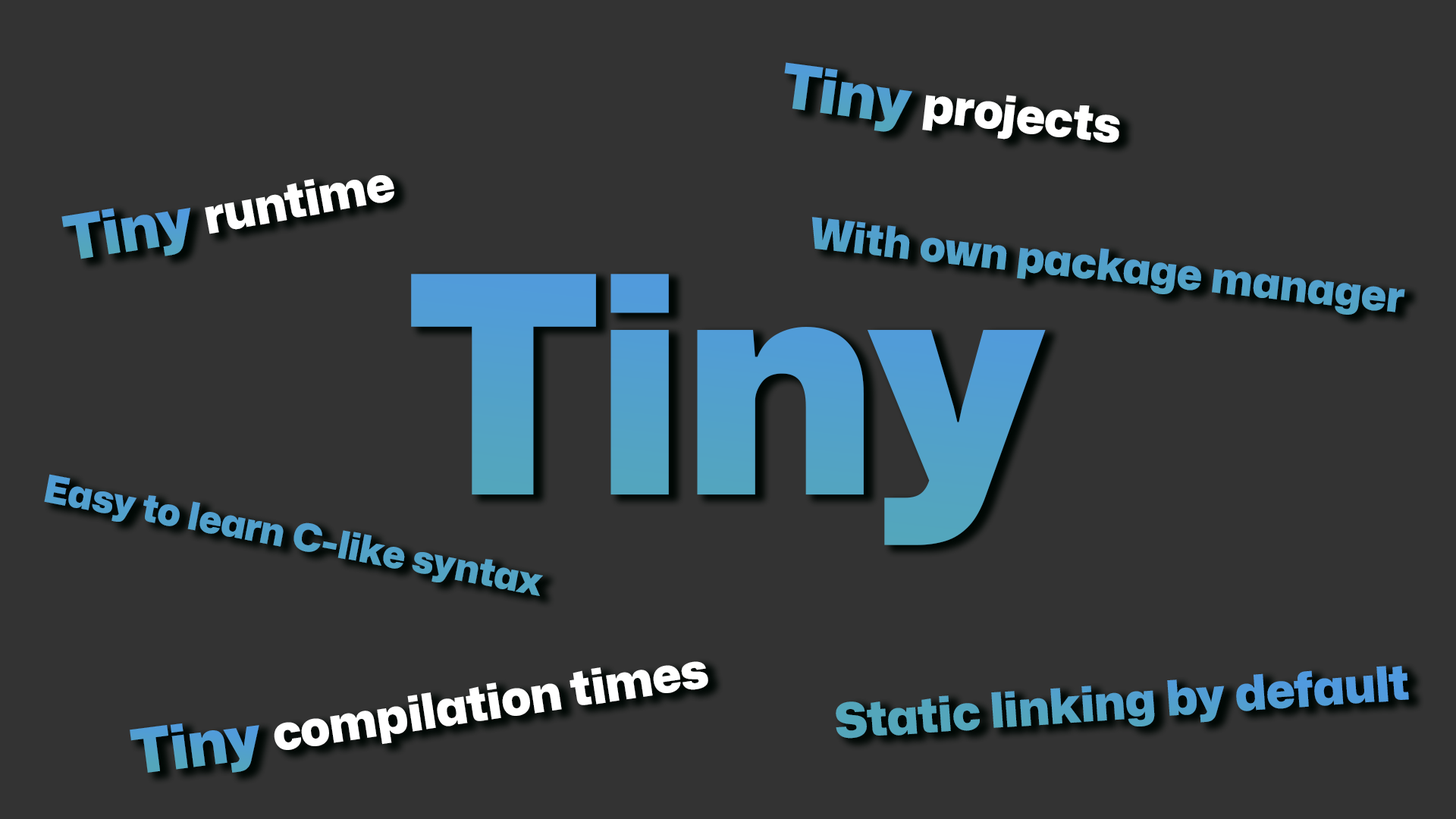
<style>
.page{position:relative;width:1456px;height:819px;background:#333333}
.page>*{position:absolute;margin:0}
.t1{font:61.5px "Mona-Sans-Black";color:#52a1cb}
.t2{font:49px "Mona-Sans-Black";color:#ffffff}
.t3{font:61.5px "Mona-Sans-Black";color:#52a0ce}
.t4{font:42.8px "Mona-Sans-Black";color:#52a1c9}
.t5{font:302.4px "Mona-Sans-Black";color:#52a0ce}
.t6{font:38.2px "Mona-Sans-Black";color:#52a1ca}
.t7{font:48.6px "Mona-Sans-Black";color:#52a2c8}
</style>
<div class="page">
<p class="t1" style="left:784px;top:62px;width:128px;height:70px;rotate:8deg">Tiny</p>
<p class="t2" style="left:922px;top:95px;width:198px;height:48px;rotate:6deg">projects</p>
<p class="t2" style="left:205px;top:175px;width:189px;height:59px;rotate:-10deg">runtime</p>
<p class="t3" style="left:61px;top:208px;width:129px;height:51px;rotate:-9deg">Tiny</p>
<p class="t4" style="left:811px;top:217px;width:594px;height:98px;rotate:6deg">With own package manager</p>
<p class="t5" style="left:411px;top:274px;width:635px;height:271px">Tiny</p>
<p class="t6" style="left:44px;top:474px;width:499px;height:122px;rotate:11deg">Easy to learn C-like syntax</p>
<p class="t2" style="left:274px;top:661px;width:434px;height:89px;rotate:-9deg">compilation times</p>
<p class="t7" style="left:836px;top:666px;width:573px;height:73px;rotate:-4deg">Static linking by default</p>
<p class="t3" style="left:130px;top:723px;width:129px;height:50px;rotate:-7deg">Tiny</p>
</div>
